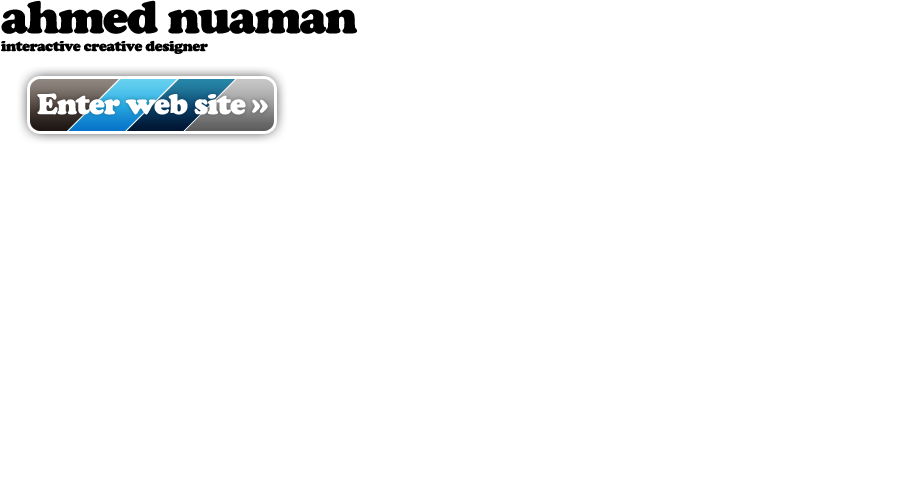
<style>
.page{position:relative;width:900px;height:500px;background:#ffffff}
.page>*{position:absolute;margin:0}
.t1{font:15px "CooperBlack";letter-spacing:-0.025em;color:#000000}
.t2{font:48px "CooperBlack";letter-spacing:-0.025em;color:#000000}
.t3{font:30px "CooperBlack";letter-spacing:-0.025em;color:#ffffff}
</style>
<div class="page">
<p class="t1" style="left:1px;top:0px;width:356px;height:54px"><span class="t2">ahmed nuaman<br></span>interactive creative designer</p>
<p class="t3" style="left:37px;top:93px;width:231px;height:22px">Enter web site »</p>
</div>
